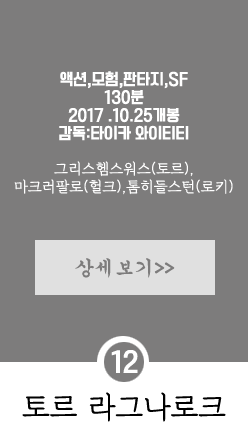
<style>
.page{position:relative;width:248px;height:442px;background:#7d7c7c}
.page>*{position:absolute;margin:0}
.t1{font:15px "TTManbalchungchunR";color:#ffffff}
.t2{font:15px "DXKPMB-KSCpc-EUC-H";color:#ffffff}
.t3{font:20px "GungsuhChe";color:#7d7c7c}
.t4{font:15px "DXKPMB-KSCpc-EUC-H";color:#7d7c7c}
.t5{font:25px "TTManbalchungchunR";color:#ffffff}
.t6{font:30px "DXKPMB-KSCpc-EUC-H";color:#000000}
</style>
<div class="page">
<p class="t1" style="left:14px;top:71px;width:219px;height:124px;text-align:center">액션,모험,판타지,SF<br>130분  <br>2017 .10.25개봉<br>감독:타이카 와이티티<br><br><span class="t2">그리스헴스워스(토르),<br>마크러팔로(헐크),톰히들스턴(로키)</span></p>
<p class="t3" style="left:75px;top:258px;width:100px;height:20px"><span class="t4"><br></span>상세보기&gt;&gt;</p>
<p class="t5" style="left:111px;top:350px;width:27px;height:23px">12</p>
<p class="t6" style="left:22px;top:392px;width:204px;height:30px">토르 라그나로크</p>
</div>
